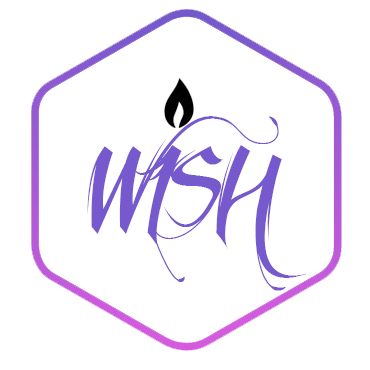
<style>
.page{position:relative;width:370px;height:370px;background:#ffffff}
.page>*{position:absolute;margin:0}
.t1{font:100px "FeathergraphyDecoration";color:#7659cc}
</style>
<div class="page">
<p class="t1" style="left:87px;top:116px;width:219px;height:175px">WISH</p>
</div>
